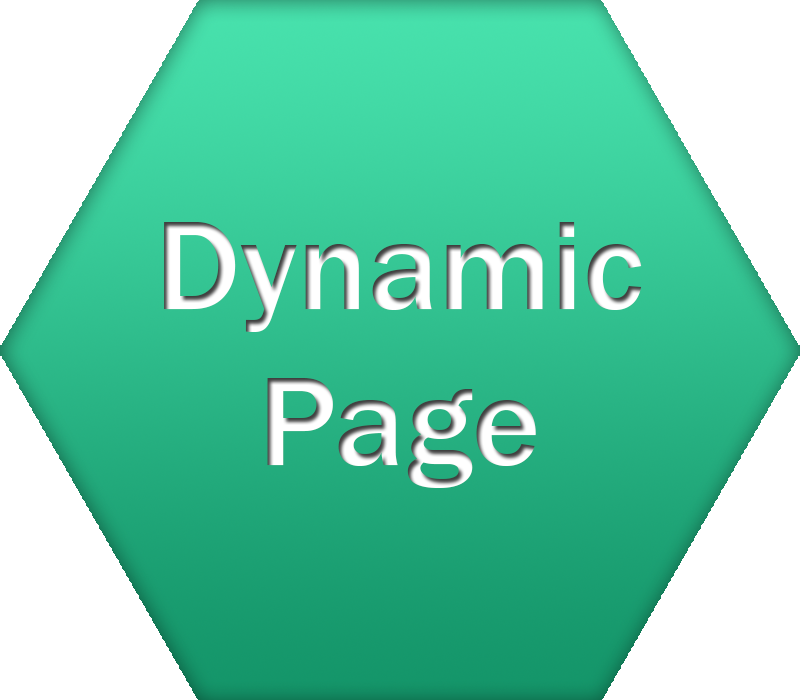
<style>
.page{position:relative;width:800px;height:700px;background:#ffffff}
.page>*{position:absolute;margin:0}
.t1{font:130px "FranklinGothic-Medium"}
</style>
<div class="page">
<p class="t1" style="left:164px;top:222px;width:478px;height:266px;text-align:center">Dynamic<br>Page</p>
</div>
